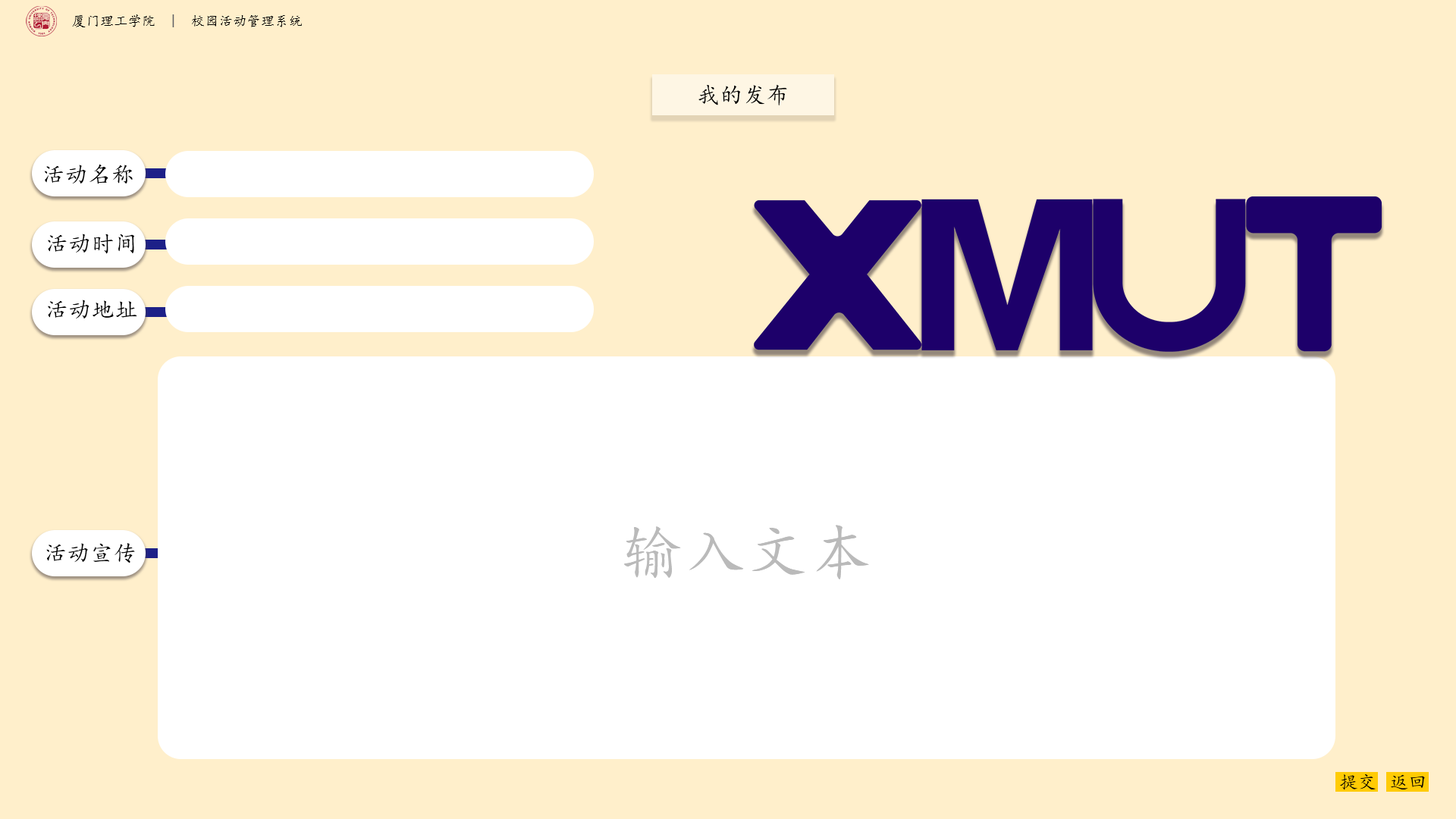
<style>
.page{position:relative;width:1456px;height:819px;background:#ffefcb}
.page>*{position:absolute;margin:0}
.t1{font:13.6px "KaiTi";letter-spacing:0.02em;color:#020202}
.t2{font:13.6px "KaiTi";letter-spacing:0.02em;color:#000000}
.t3{font:13.6px "KaiTi";letter-spacing:0.02em;color:#626266}
.t4{font:22.7px "KaiTi";letter-spacing:0.02em;color:#000000}
.t5{font:61.7px "KaiTi";letter-spacing:0.02em;color:#bababa}
.t6{font:18.2px "KaiTi";letter-spacing:0.02em;color:#000000}
</style>
<div class="page">
<p class="t1" style="left:72px;top:14px;width:230px;height:13px"><span class="t2">厦门理工学院</span><span class="t3">  |</span>  校园活动管理系统</p>
<p class="t4" style="left:698px;top:84px;width:89px;height:22px">我的发布</p>
<p class="t4" style="left:45px;top:164px;width:88px;height:20px">活动名称</p>
<p class="t4" style="left:48px;top:234px;width:86px;height:20px">活动时间</p>
<p class="t4" style="left:48px;top:300px;width:89px;height:19px">活动地址</p>
<p class="t5" style="left:624px;top:525px;width:245px;height:54px">输入文本</p>
<p class="t4" style="left:46px;top:543px;width:89px;height:20px">活动宣传</p>
<p class="t6" style="left:1340px;top:774px;width:36px;height:16px">提交</p>
<p class="t6" style="left:1391px;top:774px;width:34px;height:16px">返回</p>
</div>
